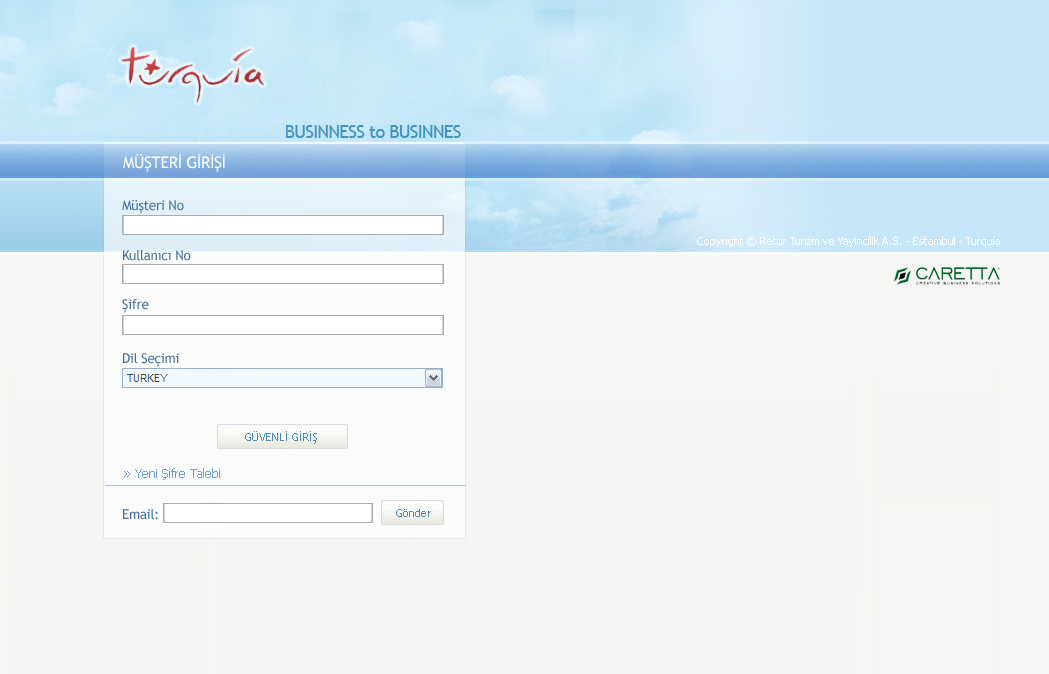
<style>
.page{position:relative;width:1049px;height:674px;background:#f4f4f2}
.page>*{position:absolute;margin:0}
.t1{font:18.1px "TrebuchetMS";letter-spacing:-0.04em;color:#4493bf}
.t2{font:16px "TrebuchetMS";letter-spacing:-0.02em;color:#ffffff}
.t3{font:13.6px "TrebuchetMS";letter-spacing:-0.02em;color:#447099}
.t4{font:11px "Tahoma";color:#ffffff}
.t5{font:11px "TrebuchetMS";color:#488bba}
.t6{font:12px "Tahoma";color:#6b9fd9}
</style>
<div class="page">
<p class="t1" style="left:286px;top:125px;width:175px;height:13px">BUSINNESS to BUSINNES</p>
<p class="t2" style="left:123px;top:154px;width:102px;height:18px">MÜŞTERİ GİRİŞİ</p>
<p class="t3" style="left:122px;top:200px;width:62px;height:14px">Müşteri No</p>
<p class="t4" style="left:697px;top:236px;width:303px;height:11px">Copyright © Retur Turizm ve Yayincilik A.S. - Estambul - Turquía</p>
<p class="t3" style="left:123px;top:250px;width:68px;height:11px">Kullanıcı No</p>
<p class="t3" style="left:122px;top:299px;width:27px;height:14px">Şifre</p>
<p class="t3" style="left:123px;top:353px;width:56px;height:14px">Dil Seçimi</p>
<p class="t5" style="left:245px;top:431px;width:72px;height:13px">GÜVENLİ GİRİŞ</p>
<p class="t6" style="left:124px;top:468px;width:96px;height:12px">» Yeni Şifre Talebi</p>
<p class="t3" style="left:123px;top:509px;width:35px;height:11px">Email:</p>
<p class="t5" style="left:396px;top:509px;width:35px;height:8px">Gönder</p>
</div>
